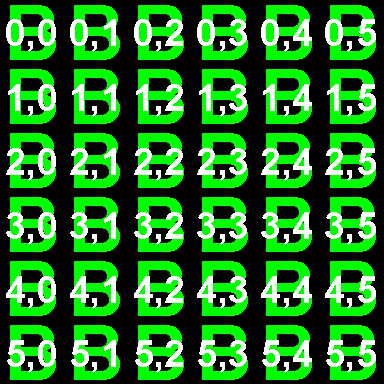
<style>
.page{position:relative;width:384px;height:384px;background:#000000}
.page>*{position:absolute;margin:0}
.t1{font:37px/64px "Arial-BoldMT";letter-spacing:0.012em;color:#ffffff}
</style>
<div class="page">
<p class="t1" style="left:6px;top:19px;width:370px;height:354px">0,0 0,1 0,2 0,3 0,4 0,5<br>1,0 1,1 1,2 1,3 1,4 1,5<br>2,0 2,1 2,2 2,3 2,4 2,5<br>3,0 3,1 3,2 3,3 3,4 3,5<br>4,0 4,1 4,2 4,3 4,4 4,5<br>5,0 5,1 5,2 5,3 5,4 5,5</p>
</div>
